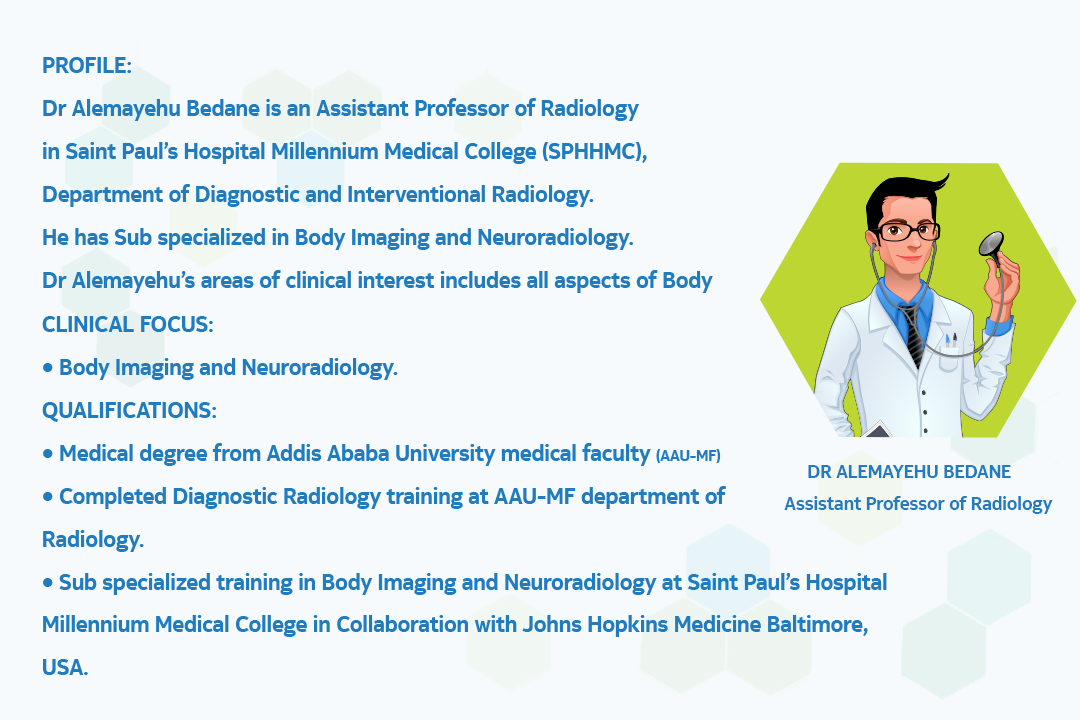
<style>
.page{position:relative;width:1080px;height:720px;background:#f6fafd}
.page>*{position:absolute;margin:0}
.t1{font:22.6px/42.9px "NokiaPureHeadline-Bold";color:#207cbf}
.t2{font:15.6px/42.9px "NokiaPureHeadline-Bold";color:#207cbf}
.t3{font:18.8px/31.3px "NokiaPureHeadline-Bold";color:#207cbf}
</style>
<div class="page">
<p class="t1" style="left:43px;top:57px;width:670px;height:236px">PROFILE:<br>Dr Alemayehu Bedane is an Assistant Professor of Radiology<br>in Saint Paul’s Hospital Millennium Medical College (SPHHMC),<br>Department of Diagnostic and Interventional Radiology. <br>He has Sub specialized in Body Imaging and Neuroradiology.<br>Dr Alemayehu’s areas of clinical interest includes all aspects of Body <br>and Neuroradiology imaging with particular interest in advanced MRI techniques.</p>
<p class="t1" style="left:42px;top:316px;width:845px;height:359px">CLINICAL FOCUS:<br>• Body Imaging and Neuroradiology.<br>QUALIFICATIONS:<br>• Medical degree from Addis Ababa University medical faculty <span class="t2">(AAU-MF)<br></span>• Completed Diagnostic Radiology training at AAU-MF department of <br>Radiology.<br>• Sub specialized training in Body Imaging and Neuroradiology at Saint Paul’s Hospital Millennium Medical College in Collaboration with Johns Hopkins Medicine Baltimore, USA.</p>
<p class="t3" style="left:784px;top:465px;width:269px;height:49px">DR ALEMAYEHU BEDANE<br>Assistant Professor of Radiology</p>
</div>
